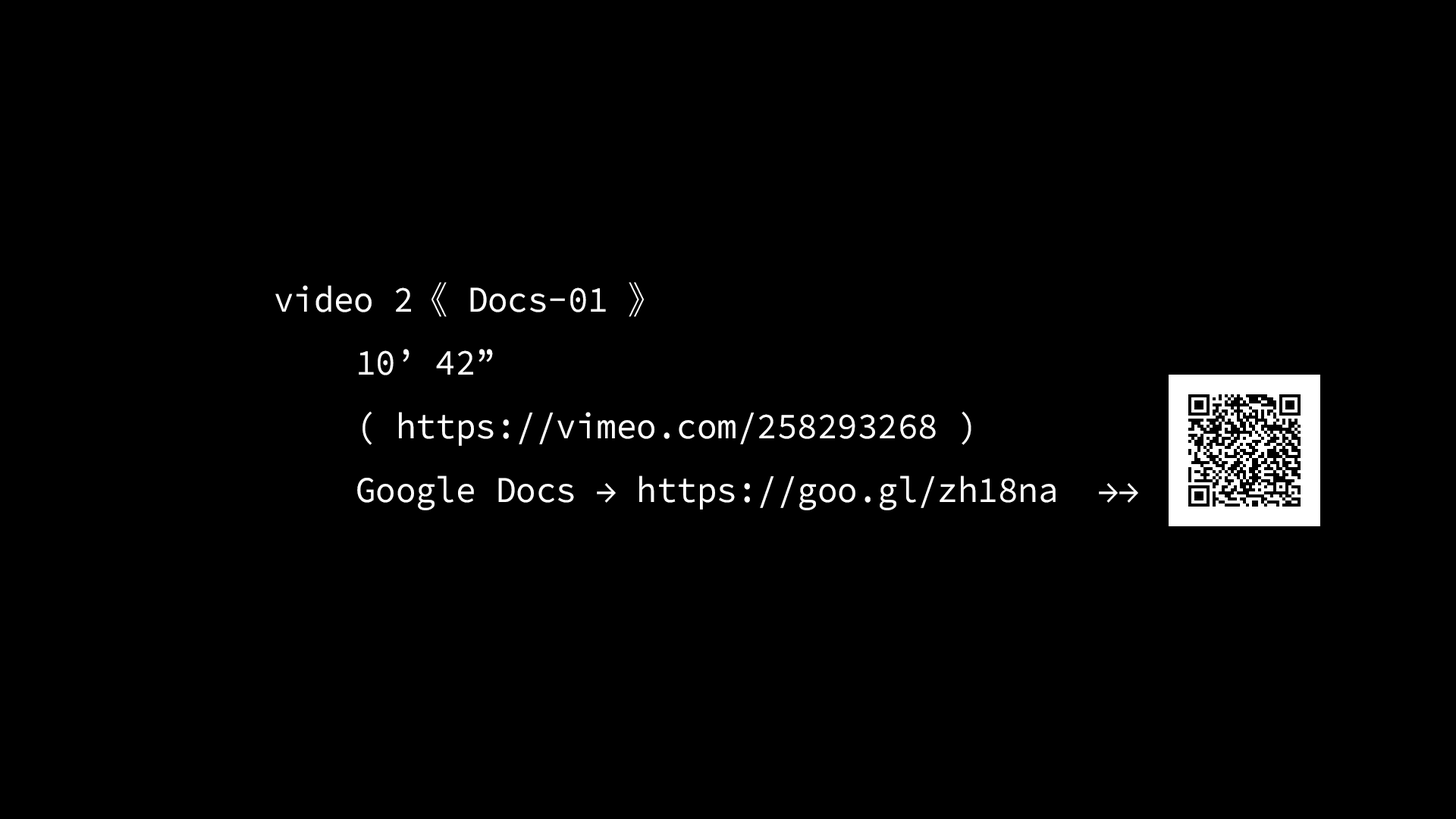
<style>
.page{position:relative;width:1456px;height:819px;background:#000000}
.page>*{position:absolute;margin:0}
.t1{font:36.4px "SourceCodePro-Regular";color:#ffffff;scale:0.92 1}
.t2{font:36.4px "KozGoPr6N-Regular";color:#ffffff;scale:0.92 1}
</style>
<div class="page">
<p class="t1" style="left:275px;top:282px;width:863px;height:228px">video 2<span class="t2">《</span> Docs-01 <span class="t2">》<br></span>   10’ 42”<br>   ( https://vimeo.com/258293268 )<br>   Google Docs → https://goo.gl/zh18na  →→</p>
</div>
